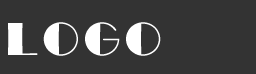
<style>
.page{position:relative;width:256px;height:74px;background:#333333}
.page>*{position:absolute;margin:0}
.t1{font:48px "Broadway";letter-spacing:0.1em;color:#ffffff}
</style>
<div class="page">
<p class="t1" style="left:8px;top:22px;width:153px;height:34px">LOGO</p>
</div>
